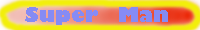
<style>
.page{position:relative;width:200px;height:30px}
.page>*{position:absolute;margin:0}
.t1{font:20px "GillSans-UltraBold";color:#868bf4}
</style>
<div class="page">
<p class="t1" style="left:25px;top:7px;width:143px;height:18px">Super   Man</p>
</div>
